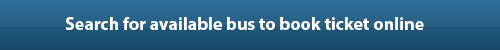
<style>
.page{position:relative;width:500px;height:50px}
.page>*{position:absolute;margin:0}
.t1{font:18px "MyriadPro-Bold";color:#ffffff}
</style>
<div class="page">
<p class="t1" style="left:65px;top:17px;width:359px;height:13px">Search for available bus to book ticket online</p>
</div>
